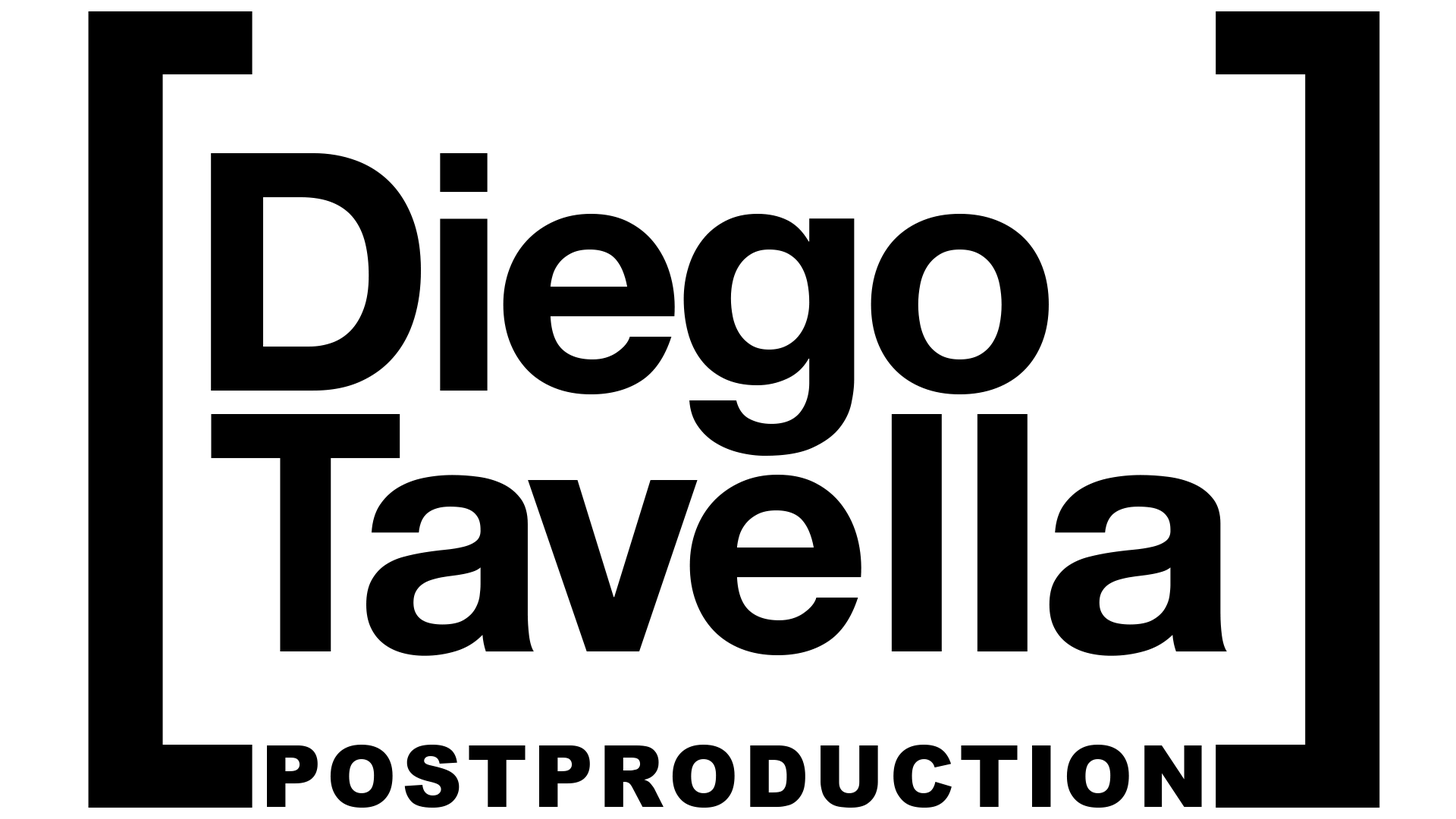
<style>
.page{position:relative;width:1456px;height:819px;background:#ffffff}
.page>*{position:absolute;margin:0}
.t1{font:870.7px "ArialMT";letter-spacing:0.124em;color:#000000}
.t2{font:332.3px "HelveticaNeue-Bold";letter-spacing:-0.04em;color:#000000}
.t3{font:332.3px "HelveticaNeue-Bold";letter-spacing:-0.046em;color:#000000}
.t4{font:332.3px "HelveticaNeue-Bold";letter-spacing:-0.06em;color:#000000}
.t5{font:332.3px "HelveticaNeue-Bold";letter-spacing:-0.028em;color:#000000;scale:1.06 1}
.t6{font:332.3px "HelveticaNeue-Bold";letter-spacing:-0.15em;color:#000000;scale:0.97 1}
.t7{font:332.3px "HelveticaNeue-Bold";letter-spacing:-0.056em;color:#000000}
.t8{font:332.3px "HelveticaNeue-Bold";color:#000000}
.t9{font:332.3px "HelveticaNeue-Bold";letter-spacing:-0.014em;color:#000000;scale:1.06 1}
.t10{font:85.9px "Arial-Black";letter-spacing:0.066em;color:#000000}
</style>
<div class="page">
<p class="t1" style="left:88px;top:11px;width:165px;height:797px">[</p>
<p class="t1" style="left:1216px;top:11px;width:164px;height:797px">]</p>
<p class="t2" style="left:211px;top:153px;width:838px;height:303px">Die<span class="t3">g</span><span class="t4">o</span></p>
<p class="t5" style="left:211px;top:414px;width:1016px;height:242px"><span class="t6">T</span><span class="t4">a</span><span class="t7">v</span><span class="t8">e</span><span class="t9">l</span>la</p>
<p class="t10" style="left:267px;top:745px;width:935px;height:63px">POSTPRODUCTION</p>
</div>
